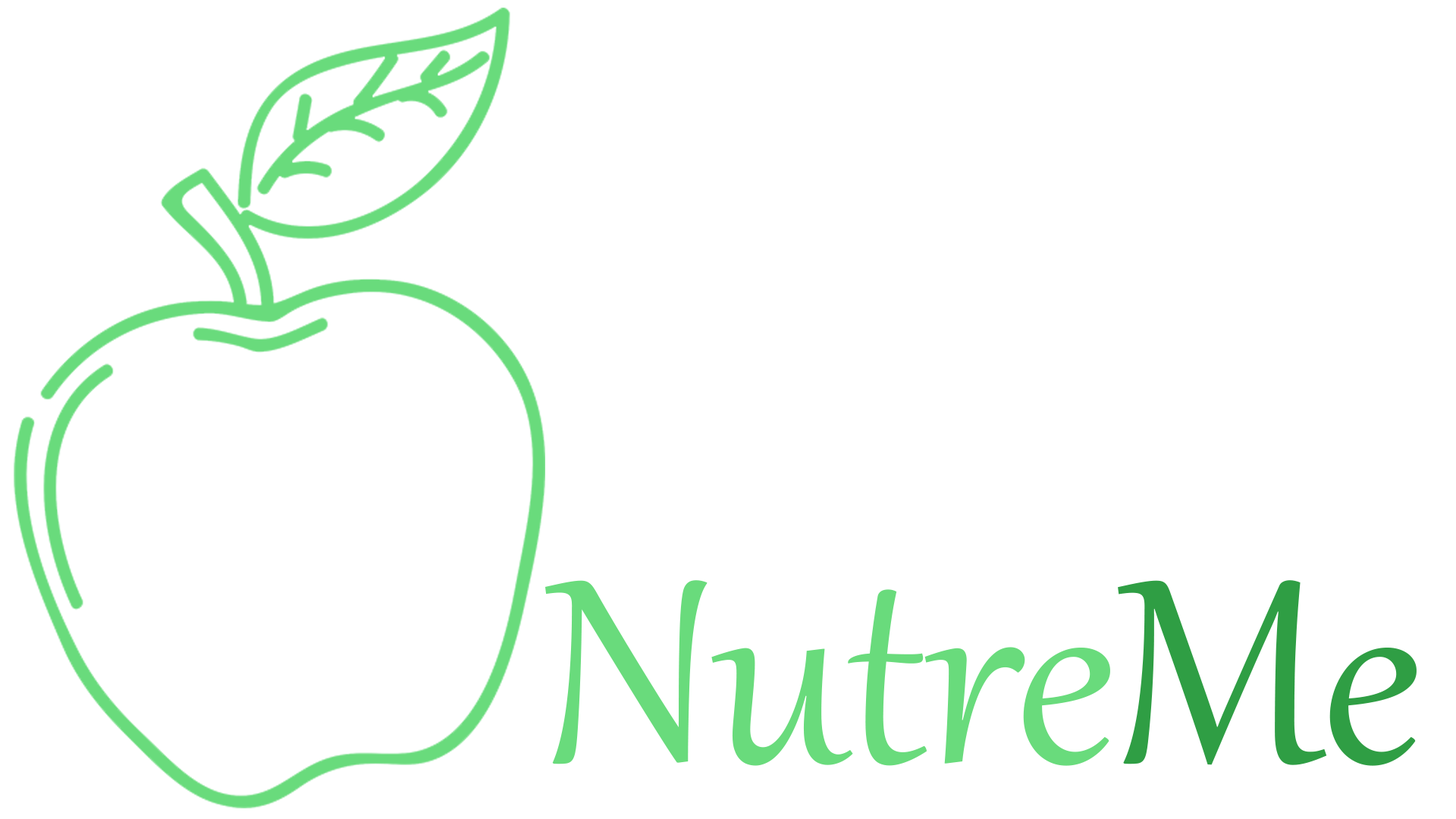
<style>
.page{position:relative;width:1456px;height:819px;background:#ffffff}
.page>*{position:absolute;margin:0}
.t1{font:321.2px "Gabriola";color:#69db7c}
.t2{font:321.2px "Gabriola";color:#2f9e44}
</style>
<div class="page">
<p class="t1" style="left:545px;top:580px;width:872px;height:186px">Nutre<span class="t2">Me</span></p>
</div>
